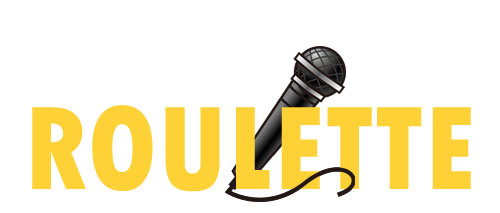
<style>
.page{position:relative;width:500px;height:213px;background:#ffffff}
.page>*{position:absolute;margin:0}
.t1{font:125px "TwCenMT-CondensedExtraBold";color:#fed136}
.t2{font:125px "TwCenMT-CondensedExtraBold";color:#ffffff}
</style>
<div class="page">
<p class="t1" style="left:32px;top:105px;width:439px;height:87px"><span class="t2"><br></span>ROULETTE</p>
</div>
